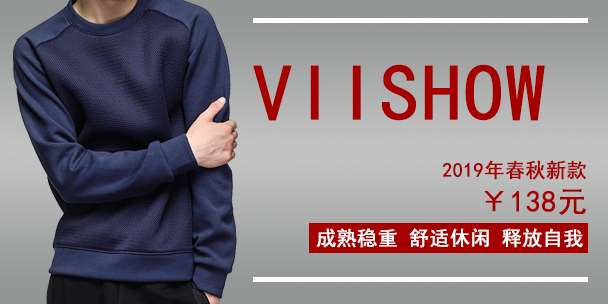
<style>
.page{position:relative;width:608px;height:304px}
.page>*{position:absolute;margin:0}
.t1{font:80px "SimHei";color:#a40000;font-weight:bold}
.t2{font:20px "SimHei";color:#a40000;font-weight:bold}
.t3{font:30px "SimHei";color:#a40000;font-weight:bold}
.t4{font:20px "SimHei";color:#fffefe;font-weight:bold}
</style>
<div class="page">
<p class="t1" style="left:253px;top:64px;width:292px;height:57px">VIISHOW</p>
<p class="t2" style="left:442px;top:160px;width:144px;height:20px">2019年春秋新款</p>
<p class="t3" style="left:484px;top:189px;width:102px;height:26px">￥138元</p>
<p class="t4" style="left:316px;top:228px;width:267px;height:20px">成熟稳重 舒适休闲 释放自我</p>
</div>
